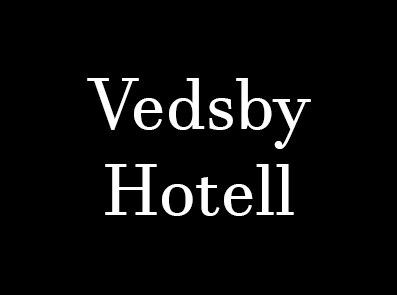
<style>
.page{position:relative;width:397px;height:295px;background:#000000}
.page>*{position:absolute;margin:0}
.t1{font:72px "JavaneseText";color:#fefefe}
</style>
<div class="page">
<p class="t1" style="left:87px;top:78px;width:224px;height:138px">Vedsby<br>            Hotell</p>
</div>
